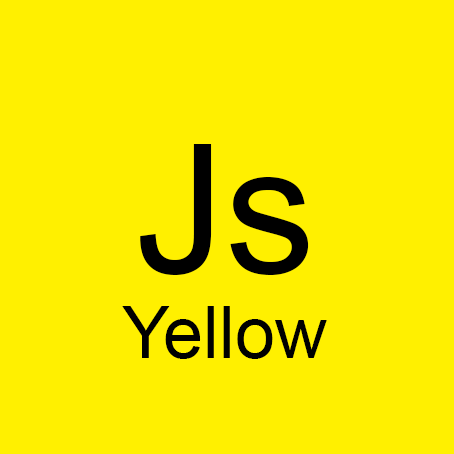
<style>
.page{position:relative;width:454px;height:454px;background:#fff000}
.page>*{position:absolute;margin:0}
.t1{font:180px "ArialMT";color:#000000}
.t2{font:72px "ArialMT";color:#000000}
</style>
<div class="page">
<p class="t1" style="left:140px;top:144px;width:169px;height:131px">Js</p>
<p class="t2" style="left:122px;top:306px;width:205px;height:53px">Yellow</p>
</div>
